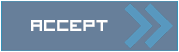
<style>
.page{position:relative;width:179px;height:52px;background:#677f9a}
.page>*{position:absolute;margin:0}
.t1{font:17.5px "imagine-font";color:#ffffff}
</style>
<div class="page">
<p class="t1" style="left:31px;top:20px;width:77px;height:11px">ACCEPT</p>
</div>
